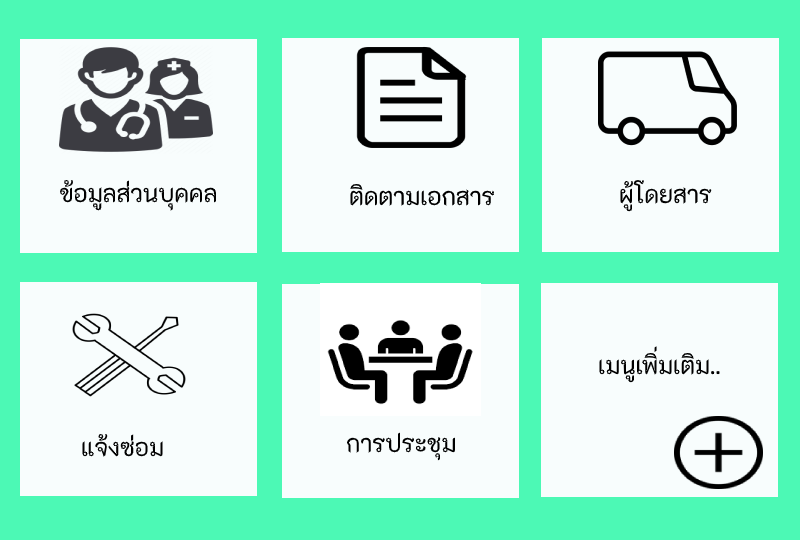
<style>
.page{position:relative;width:800px;height:540px;background:#f8fdfd}
.page>*{position:absolute;margin:0}
.t1{font:24px "K2D-Regular";color:#000000}
</style>
<div class="page">
<p class="t1" style="left:59px;top:180px;width:157px;height:31px">ข้อมูลส่วนบุคคล</p>
<p class="t1" style="left:350px;top:184px;width:145px;height:22px">ติดตามเอกสาร</p>
<p class="t1" style="left:620px;top:180px;width:92px;height:32px">ผู้โดยสาร</p>
<p class="t1" style="left:599px;top:346px;width:121px;height:37px">เมนูเพิ่มเติม..</p>
<p class="t1" style="left:82px;top:434px;width:81px;height:23px">แจ้งซ่อม</p>
<p class="t1" style="left:346px;top:432px;width:109px;height:29px">การประชุม</p>
</div>
